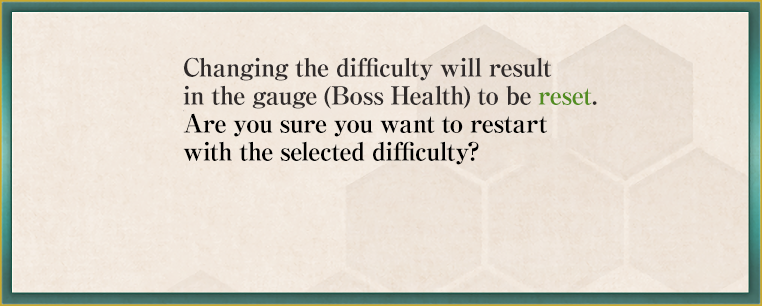
<style>
.page{position:relative;width:762px;height:306px}
.page>*{position:absolute;margin:0}
.t1{font:25px/28px "RyuminPro-ExBold";letter-spacing:-0.04em;color:#302b2b}
.t2{font:25px/28px "RyuminPro-ExBold";letter-spacing:-0.04em;color:#538d20}
.t3{font:25px/28px "RyuminPro-ExBold";letter-spacing:-0.04em;color:#000000}
</style>
<div class="page">
<p class="t1" style="left:183px;top:57px;width:414px;height:108px">Changing the difficulty will result<br>in the gauge (Boss Health) to be <span class="t2">reset</span>.<br><span class="t3">Are you sure you want to restart <br>with the selected difficulty?</span></p>
</div>
